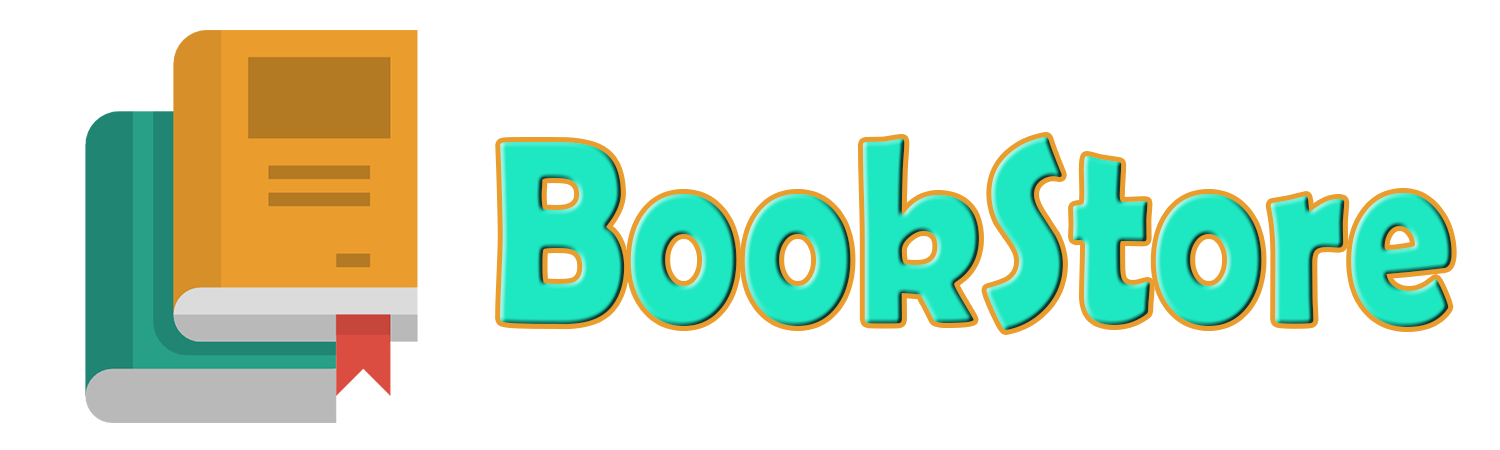
<style>
.page{position:relative;width:1500px;height:450px;background:#ffffff}
.page>*{position:absolute;margin:0}
.t1{font:263.4px "BerlinSansFBDemi-Bold";color:#1ee8c2;scale:0.81 1}
</style>
<div class="page">
<p class="t1" style="left:500px;top:136px;width:952px;height:194px">BookStore</p>
</div>
